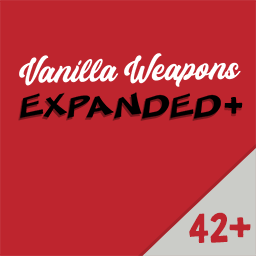
<style>
.page{position:relative;width:256px;height:256px;background:#be252e}
.page>*{position:absolute;margin:0}
.t1{font:30px "Helmida-Regular";color:#ffffff}
.t2{font:18px "Helmida-Regular";color:#000000}
.t3{font:28px "SFMincedMeatExtended";color:#000000}
.t4{font:30px "GranstanderClean"}
.t5{font:30px "GranstanderClean";color:#000000}
.t6{font:36px "GranstanderClean";color:#be252e}
</style>
<div class="page">
<p class="t1" style="left:19px;top:53px;width:222px;height:34px;rotate:-1deg"><span class="t2"><br><br></span>Vanilla Weapons</p>
<p class="t3" style="left:18px;top:95px;width:202px;height:26px;opacity:0.37">EXPANDED</p>
<p class="t3" style="left:20px;top:92px;width:201px;height:27px">EXPANDED</p>
<p class="t4" style="left:224px;top:99px;width:18px;height:18px">+</p>
<p class="t5" style="left:224px;top:97px;width:19px;height:17px">+</p>
<p class="t6" style="left:189px;top:212px;width:62px;height:31px">42+</p>
</div>
